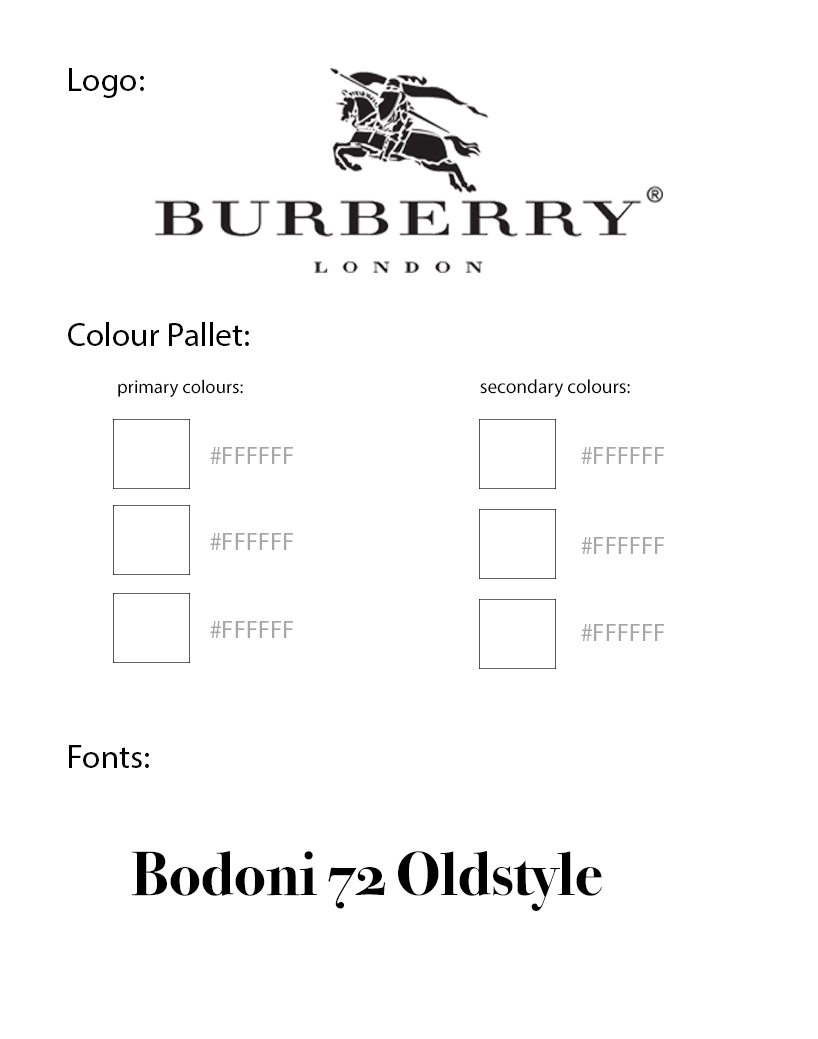
<style>
.page{position:relative;width:818px;height:1039px;background:#ffffff}
.page>*{position:absolute;margin:0}
.t1{font:33.3px "MyriadPro-Regular";color:#000000}
.t2{font:18.7px "MyriadPro-Regular";color:#000000}
.t3{font:19.4px "MyriadPro-Regular";color:#000000}
.t4{font:25px "MyriadPro-Regular";color:#a7a7a7}
.t5{font:62.5px "BodoniSvtyTwoOSITCTT-Bold";color:#000000}
</style>
<div class="page">
<p class="t1" style="left:69px;top:68px;width:75px;height:30px">Logo:</p>
<p class="t1" style="left:68px;top:322px;width:181px;height:24px">Colour Pallet:</p>
<p class="t2" style="left:118px;top:379px;width:125px;height:19px">primary colours:</p>
<p class="t3" style="left:480px;top:379px;width:150px;height:19px">secondary colours:</p>
<p class="t4" style="left:210px;top:447px;width:83px;height:17px">#FFFFFF</p>
<p class="t4" style="left:581px;top:447px;width:83px;height:17px">#FFFFFF</p>
<p class="t4" style="left:210px;top:533px;width:83px;height:17px">#FFFFFF</p>
<p class="t4" style="left:581px;top:537px;width:83px;height:17px">#FFFFFF</p>
<p class="t4" style="left:210px;top:621px;width:83px;height:17px">#FFFFFF</p>
<p class="t4" style="left:581px;top:624px;width:83px;height:17px">#FFFFFF</p>
<p class="t1" style="left:69px;top:745px;width:80px;height:23px">Fonts:</p>
<p class="t5" style="left:131px;top:851px;width:471px;height:60px">Bodoni 72 Oldstyle</p>
</div>
